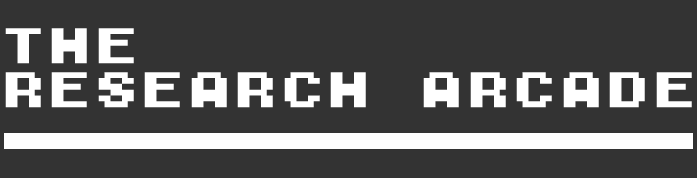
<style>
.page{position:relative;width:697px;height:178px;background:#333333}
.page>*{position:absolute;margin:0}
.t1{font:46.6px/44.3px "M04_FATAL-FURY-BLACK";color:#ffffff}
</style>
<div class="page">
<p class="t1" style="left:5px;top:28px;width:687px;height:80px">THE <br>RESEARCH ARCADE</p>
</div>
